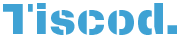
<style>
.page{position:relative;width:180px;height:37px;background:#ffffff}
.page>*{position:absolute;margin:0}
.t1{font:43.5px "Archicoco";color:#3fa2d4}
</style>
<div class="page">
<p class="t1" style="left:3px;top:3px;width:174px;height:32px">Tiscod.</p>
</div>
